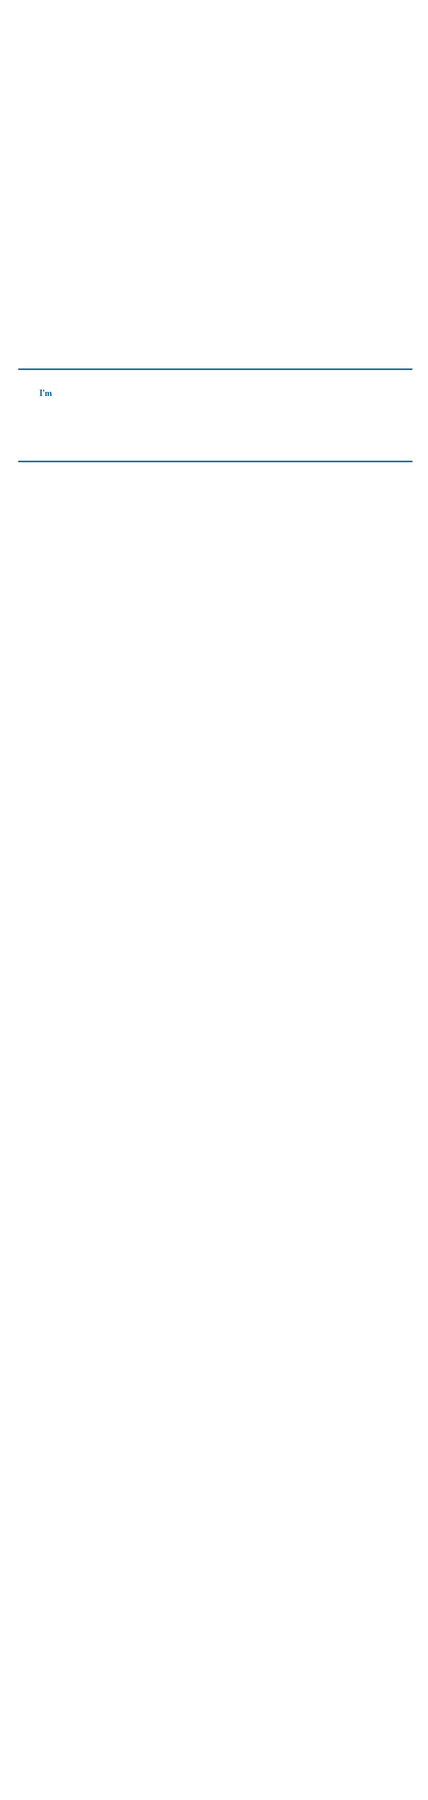
<style>
.page{position:relative;width:428px;height:1800px;background:#ffffff}
.page>*{position:absolute;margin:0}
.t1{font:9px "ACaslonPro-Bold";letter-spacing:-0.005em;color:#006391}
</style>
<div class="page">
<p class="t1" style="left:39px;top:390px;width:13px;height:6px">I’m</p>
</div>
